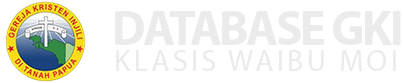
<style>
.page{position:relative;width:404px;height:83px;background:#ffffff}
.page>*{position:absolute;margin:0}
.t1{font:49px "MyriadPro-Bold";letter-spacing:-0.05em;color:#ebebeb;text-transform:uppercase}
.t2{font:30px "MyriadPro-Regular";letter-spacing:0.11em;color:#ebebeb;text-transform:uppercase}
</style>
<div class="page">
<p class="t1" style="left:115px;top:11px;width:286px;height:34px">Database GKI</p>
<p class="t2" style="left:116px;top:50px;width:280px;height:21px">Klasis Waibu Moi</p>
</div>
